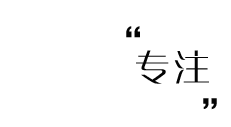
<style>
.page{position:relative;width:231px;height:127px;background:#ffffff}
.page>*{position:absolute;margin:0}
.t1{font:36px/24px "FZZYJW--GB1-0";letter-spacing:0.1em;color:#040404}
.t2{font:36px "FZZQJW--GB1-0";letter-spacing:0.1em;color:#040404}
</style>
<div class="page">
<p class="t1" style="left:126px;top:26px;width:91px;height:84px">“<br><br><br>       ”</p>
<p class="t2" style="left:136px;top:50px;width:73px;height:34px">专注</p>
</div>
